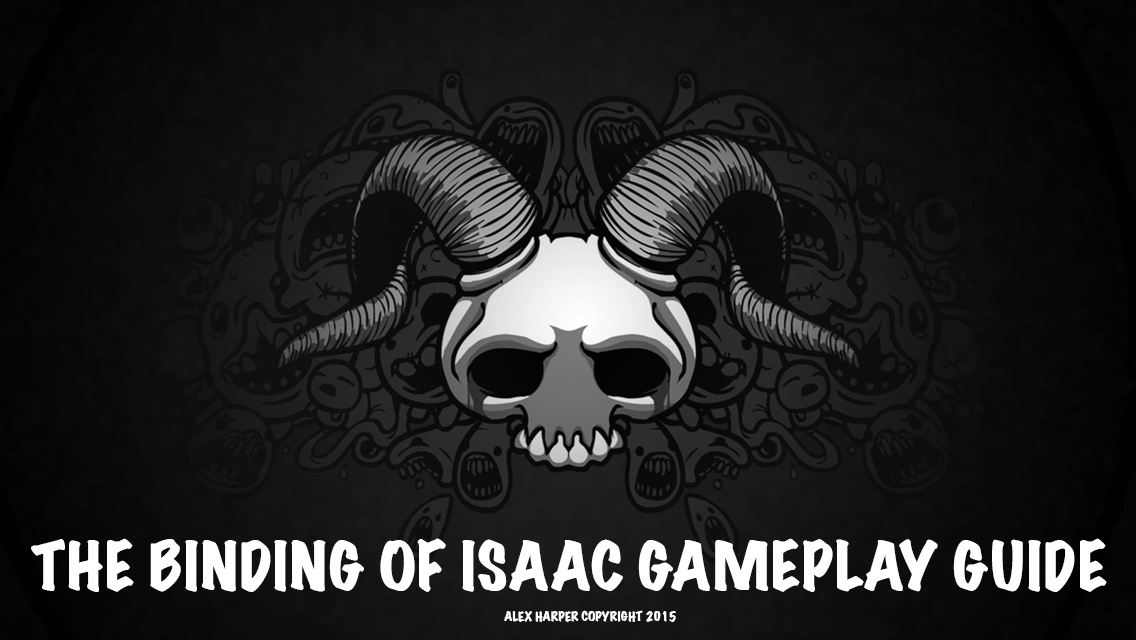
<style>
.page{position:relative;width:1136px;height:640px}
.page>*{position:absolute;margin:0}
.t1{font:60px "MarkerFelt-Wide";color:#ffffff}
.t2{font:12px "MarkerFelt-Wide";color:#ffffff}
</style>
<div class="page">
<p class="t1" style="left:31px;top:538px;width:1076px;height:54px">THE BINDING OF ISAAC GAMEPLAY GUIDE</p>
<p class="t2" style="left:504px;top:610px;width:172px;height:12px">ALEX HARPER COPYRIGHT 2015</p>
</div>
